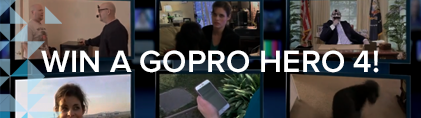
<style>
.page{position:relative;width:421px;height:118px}
.page>*{position:absolute;margin:0}
.t1{font:32px "ProximaNova-Semibold";color:#ffffff;text-transform:uppercase}
</style>
<div class="page">
<p class="t1" style="left:41px;top:50px;width:338px;height:23px">WIN A GOPRO HERO 4!</p>
</div>
